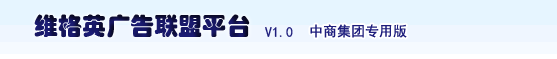
<style>
.page{position:relative;width:557px;height:59px;background:#e6f5ff}
.page>*{position:absolute;margin:0}
.t1{font:24px "STHupo"}
.t2{font:14px "SimHei";color:#1d1d7c}
</style>
<div class="page">
<p class="t1" style="left:34px;top:14px;width:216px;height:24px">维格英广告联盟平台</p>
<p class="t2" style="left:265px;top:27px;width:28px;height:10px">V1.0</p>
<p class="t2" style="left:310px;top:24px;width:97px;height:14px">中商集团专用版</p>
</div>
